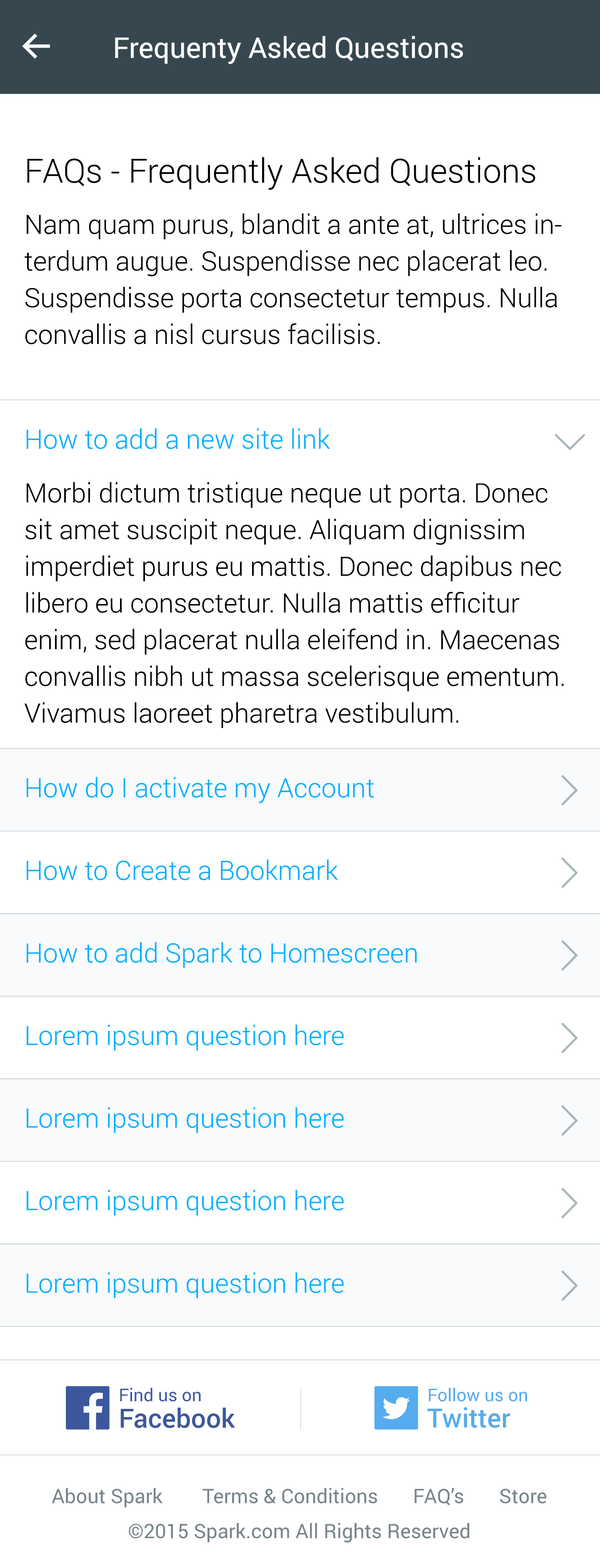
<style>
.page{position:relative;width:600px;height:1568px;background:#ffffff}
.page>*{position:absolute;margin:0}
.t1{font:28.5px "Roboto-Regular";color:#ffffff}
.t2{font:33.4px "Roboto-Light";color:#000000}
.t3{font:26.7px/36.7px "Roboto-Light";color:#010101}
.t4{font:26.7px "Roboto-Light";color:#00b0ff}
.t5{font:17.6px "Roboto-Regular";color:#3c579e}
.t6{font:17.6px "Roboto-Regular";color:#55acee}
.t7{font:26.5px "Roboto-Medium";color:#3c579e}
.t8{font:26.5px "Roboto-Medium";color:#55acee}
.t9{font:20px/35px "Roboto-Regular";color:#78858b}
</style>
<div class="page">
<p class="t1" style="left:115px;top:36px;width:348px;height:28px">Frequenty Asked Questions</p>
<p class="t2" style="left:27px;top:157px;width:509px;height:33px">FAQs - Frequently Asked Questions</p>
<p class="t3" style="left:25px;top:213px;width:537px;height:131px">Nam quam purus, blandit a ante at, ultrices interdum augue. Suspendisse nec placerat leo. Suspendisse porta consectetur tempus. Nulla convallis a nisl cursus facilisis.</p>
<p class="t4" style="left:27px;top:428px;width:303px;height:21px">How to add a new site link</p>
<p class="t3" style="left:25px;top:482px;width:539px;height:246px">Morbi dictum tristique neque ut porta. Donec sit amet suscipit neque. Aliquam dignissim<br>imperdiet purus eu mattis. Donec dapibus nec libero eu consectetur. Nulla mattis efficitur enim, sed placerat nulla eleifend in. Maecenas convallis nibh ut massa scelerisque ementum. Vivamus laoreet pharetra vestibulum.</p>
<p class="t4" style="left:27px;top:777px;width:347px;height:26px">How do I activate my Account</p>
<p class="t4" style="left:27px;top:859px;width:311px;height:22px">How to Create a Bookmark</p>
<p class="t4" style="left:27px;top:942px;width:390px;height:26px">How to add Spark to Homescreen</p>
<p class="t4" style="left:27px;top:1024px;width:317px;height:27px">Lorem ipsum question here</p>
<p class="t4" style="left:27px;top:1107px;width:317px;height:26px">Lorem ipsum question here</p>
<p class="t4" style="left:27px;top:1189px;width:317px;height:27px">Lorem ipsum question here</p>
<p class="t4" style="left:27px;top:1272px;width:317px;height:26px">Lorem ipsum question here</p>
<p class="t5" style="left:120px;top:1387px;width:81px;height:15px">Find us on</p>
<p class="t6" style="left:429px;top:1387px;width:98px;height:15px">Follow us on</p>
<p class="t7" style="left:120px;top:1407px;width:116px;height:21px">Facebook</p>
<p class="t8" style="left:428px;top:1407px;width:83px;height:21px">Twitter</p>
<p class="t9" style="left:52px;top:1488px;width:495px;height:55px;text-align:center">About Spark        Terms &amp; Conditions       FAQ’s       Store<br>©2015 Spark.com All Rights Reserved</p>
</div>
